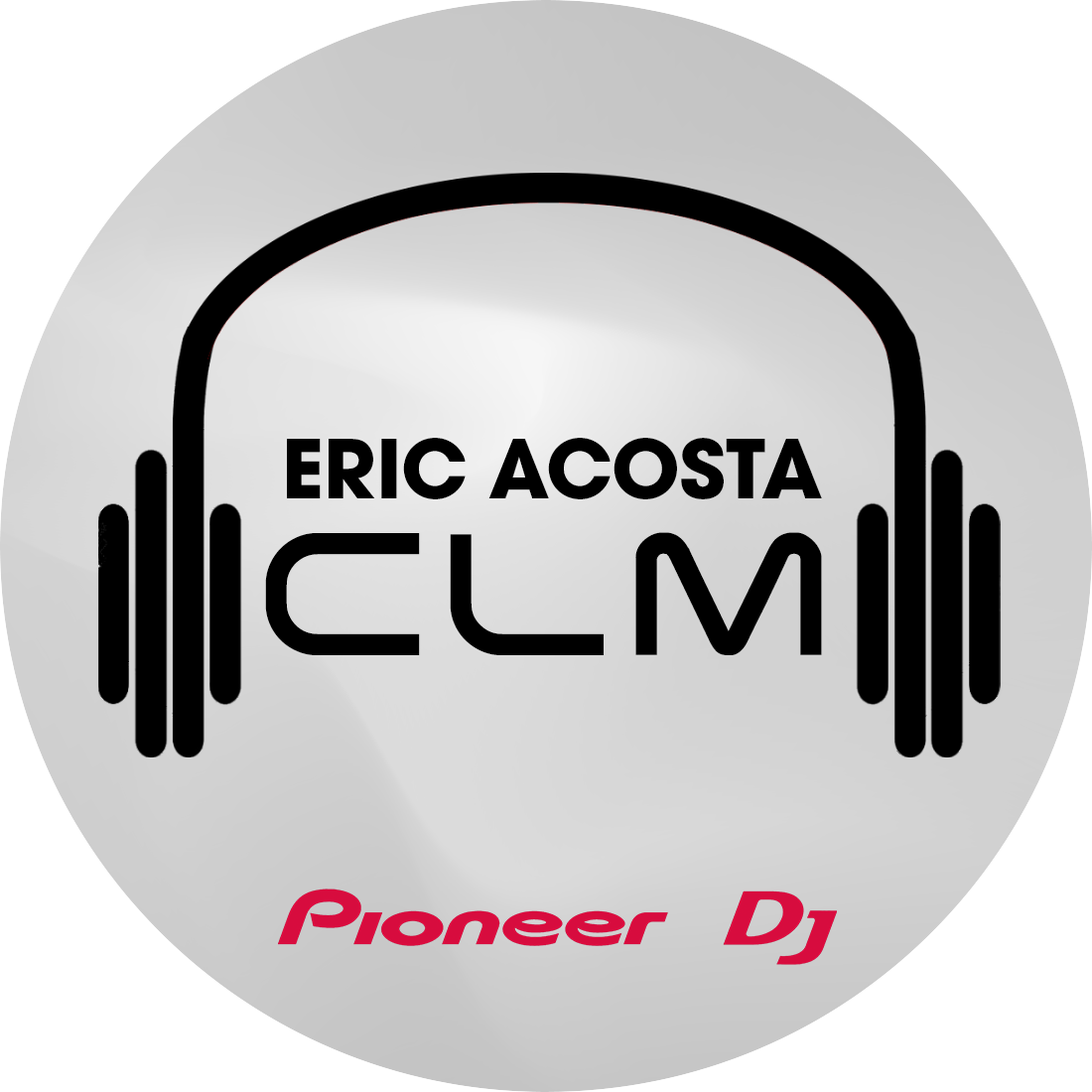
<style>
.page{position:relative;width:1092px;height:1092px;background:#ffffff}
.page>*{position:absolute;margin:0}
.t1{font:89.3px "AvantGardEF-Bold";color:#000000}
.t2{font:178.7px "Arkitech-Bold";color:#000000}
</style>
<div class="page">
<p class="t1" style="left:287px;top:438px;width:535px;height:61px">ERIC ACOSTA</p>
<p class="t2" style="left:265px;top:532px;width:557px;height:123px">CLM</p>
</div>
